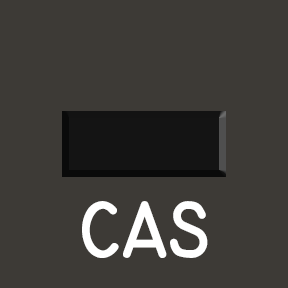
<style>
.page{position:relative;width:288px;height:288px;background:#3d3a36}
.page>*{position:absolute;margin:0}
.t1{font:56.9px "MS-33558-Regular";letter-spacing:-0.04em;color:#ffffff}
</style>
<div class="page">
<p class="t1" style="left:82px;top:201px;width:126px;height:57px">CAS</p>
</div>
